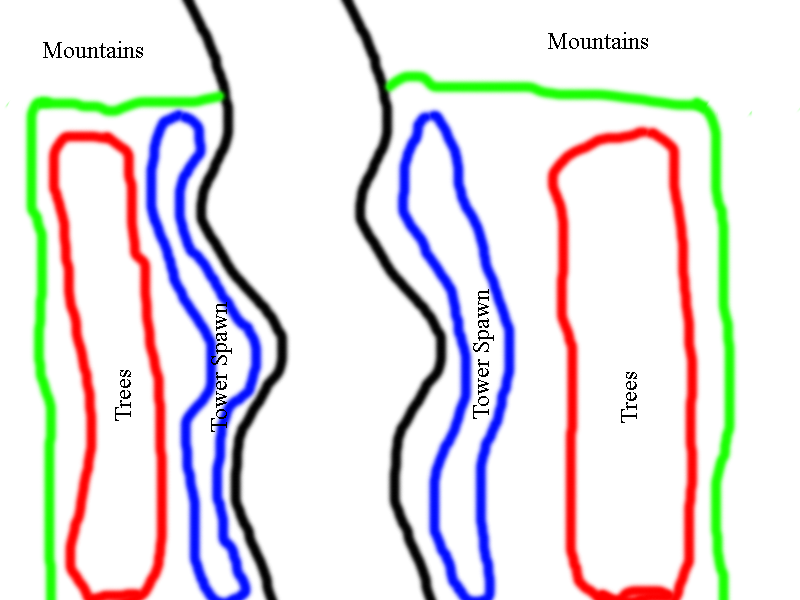
<style>
.page{position:relative;width:800px;height:600px;background:#ffffff}
.page>*{position:absolute;margin:0}
.t1{font:24px "TimesNewRomanPSMT";color:#000000}
.t2{font:23.7px "TimesNewRomanPSMT";color:#000000}
</style>
<div class="page">
<p class="t1" style="left:43px;top:41px;width:100px;height:17px">Mountains</p>
<p class="t1" style="left:548px;top:32px;width:100px;height:17px">Mountains</p>
<p class="t2" style="left:473px;top:289px;width:21px;height:130px;rotate:-90deg">Tower Spawn</p>
<p class="t2" style="left:211px;top:302px;width:21px;height:130px;rotate:-90deg">Tower Spawn</p>
<p class="t2" style="left:115px;top:370px;width:16px;height:51px;rotate:-90deg">Trees</p>
<p class="t2" style="left:621px;top:372px;width:16px;height:51px;rotate:-90deg">Trees</p>
</div>
